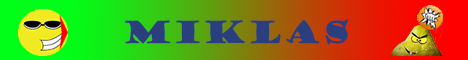
<style>
.page{position:relative;width:468px;height:60px}
.page>*{position:absolute;margin:0}
.t1{font:30px "GoudyStout";color:#2b3e7d}
</style>
<div class="page">
<p class="t1" style="left:124px;top:19px;width:224px;height:26px">MIKLAS</p>
</div>
